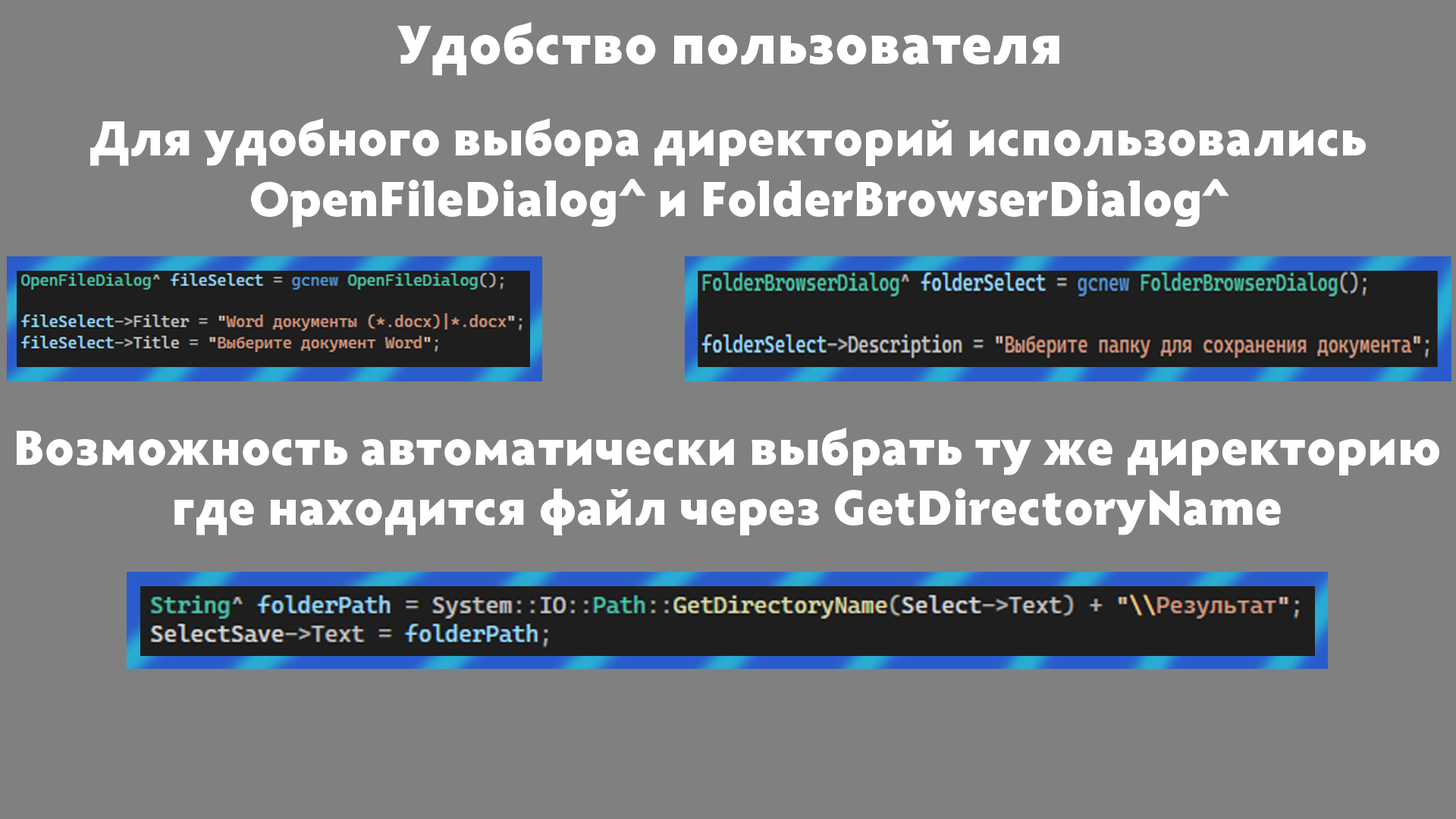
<style>
.page{position:relative;width:1456px;height:819px;background:#808080}
.page>*{position:absolute;margin:0}
.t1{font:56.9px "Radiance-Black";color:#ffffff}
.t2{font:50.6px "Radiance-Black";color:#ffffff}
</style>
<div class="page">
<p class="t1" style="left:397px;top:22px;width:662px;height:54px">Удобство пользователя</p>
<p class="t2" style="left:90px;top:118px;width:1276px;height:109px;text-align:center">Для удобного выбора директорий использовались  <br>OpenFileDialog^ и FolderBrowserDialog^</p>
<p class="t2" style="left:16px;top:428px;width:1423px;height:107px;text-align:center">Возможность автоматически выбрать ту же директорию<br>где находится файл через GetDirectoryName</p>
</div>
